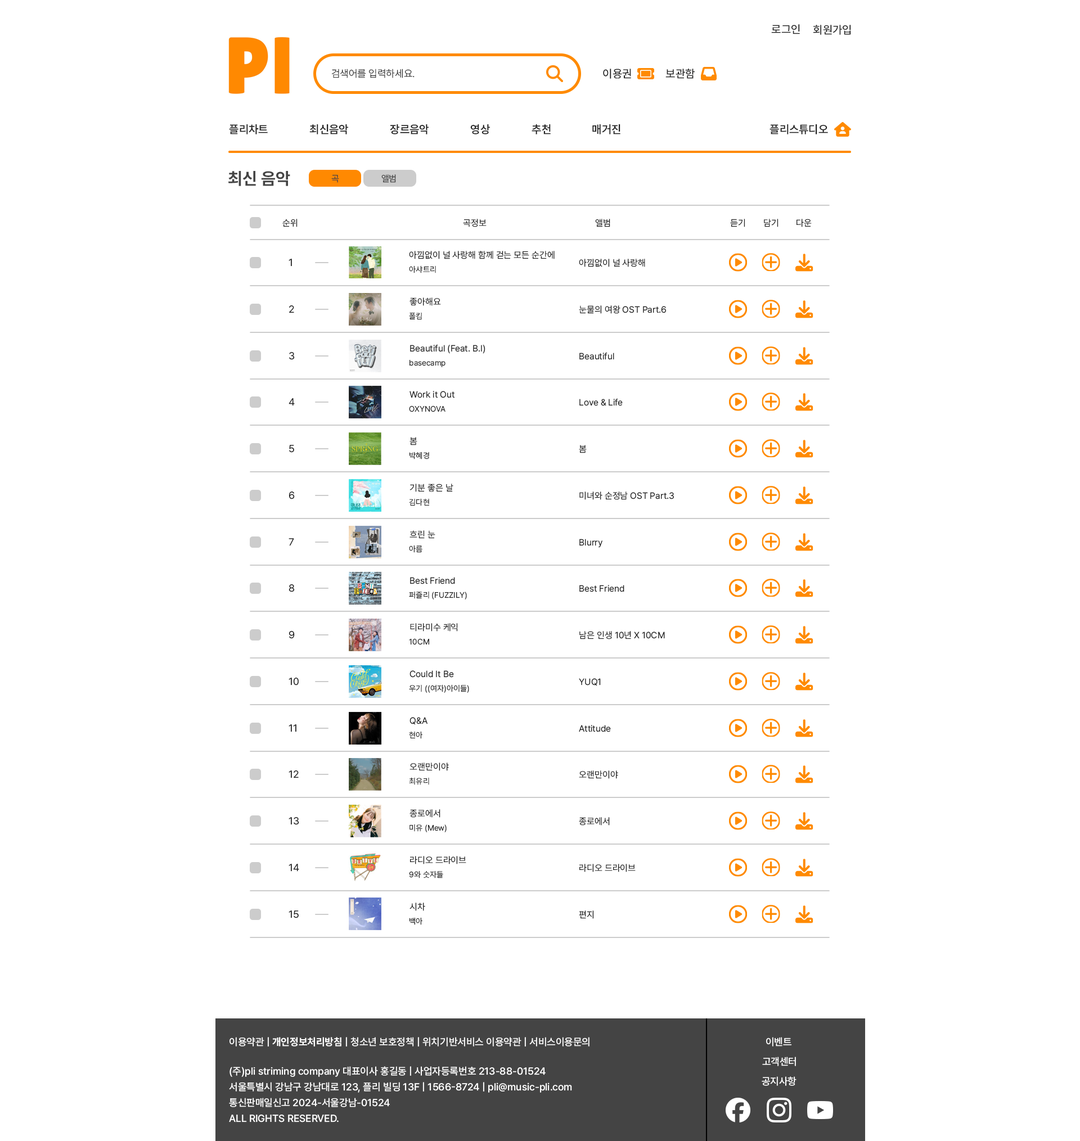
<style>
.page{position:relative;width:1080px;height:1141px;background:#ffffff}
.page>*{position:absolute;margin:0}
.t1{font:11.3px "Pretendard-Medium";color:#222222}
.t2{font:11.2px "Pretendard-Medium";color:#222222}
.t3{font:10.1px "Pretendard-Light";color:#222222}
.t4{font:11.3px "Pretendard-SemiBold";color:#222222}
.t5{font:16.9px "Pretendard-Bold";color:#444444}
.t6{font:9px "Pretendard-Regular";color:#444444}
.t7{font:9px "Pretendard-Regular";color:#222222}
.t8{font:10.1px "Pretendard-Regular";color:#222222}
.t9{font:7.9px "Pretendard-Regular";color:#222222}
.t10{font:10.1px "Pretendard-Medium";color:#ffffff}
.t11{font:10.1px "Pretendard-Bold";color:#ffffff}
.t12{font:10.1px/15.8px "Pretendard-Medium";color:#ffffff}
</style>
<div class="page">
<p class="t1" style="left:771px;top:24px;width:29px;height:10px">로그인</p>
<p class="t2" style="left:813px;top:25px;width:38px;height:10px">회원가입</p>
<p class="t3" style="left:331px;top:69px;width:84px;height:9px">검색어를 입력하세요.</p>
<p class="t1" style="left:603px;top:69px;width:28px;height:10px">이용권</p>
<p class="t2" style="left:665px;top:69px;width:30px;height:10px">보관함</p>
<p class="t4" style="left:229px;top:124px;width:39px;height:10px">플리차트</p>
<p class="t4" style="left:309px;top:124px;width:39px;height:10px">최신음악</p>
<p class="t4" style="left:390px;top:124px;width:39px;height:10px">장르음악</p>
<p class="t4" style="left:470px;top:124px;width:20px;height:10px">영상</p>
<p class="t4" style="left:532px;top:124px;width:19px;height:10px">추천</p>
<p class="t4" style="left:592px;top:124px;width:28px;height:10px">매거진</p>
<p class="t4" style="left:770px;top:124px;width:58px;height:10px">플리스튜디오</p>
<p class="t5" style="left:228px;top:171px;width:62px;height:15px">최신 음악</p>
<p class="t6" style="left:331px;top:175px;width:8px;height:8px">곡</p>
<p class="t6" style="left:381px;top:174px;width:15px;height:9px">앨범</p>
<p class="t7" style="left:282px;top:219px;width:16px;height:8px">순위</p>
<p class="t7" style="left:463px;top:219px;width:24px;height:8px">곡정보</p>
<p class="t7" style="left:595px;top:219px;width:15px;height:8px">앨범</p>
<p class="t7" style="left:730px;top:219px;width:15px;height:8px">듣기</p>
<p class="t7" style="left:764px;top:219px;width:14px;height:8px">담기</p>
<p class="t7" style="left:796px;top:219px;width:16px;height:8px">다운</p>
<p class="t7" style="left:409px;top:251px;width:146px;height:8px">아낌없이 널 사랑해 함께 걷는 모든 순간에</p>
<p class="t8" style="left:289px;top:259px;width:3px;height:8px">1</p>
<p class="t9" style="left:409px;top:266px;width:27px;height:7px">아샤트리</p>
<p class="t7" style="left:579px;top:259px;width:66px;height:8px">아낌없이 널 사랑해</p>
<p class="t8" style="left:289px;top:305px;width:5px;height:8px">2</p>
<p class="t7" style="left:410px;top:298px;width:31px;height:8px">좋아해요</p>
<p class="t7" style="left:579px;top:305px;width:87px;height:9px">눈물의 여왕 OST Part.6</p>
<p class="t9" style="left:409px;top:312px;width:13px;height:8px">폴킴</p>
<p class="t8" style="left:289px;top:352px;width:6px;height:8px">3</p>
<p class="t7" style="left:410px;top:345px;width:75px;height:9px">Beautiful (Feat. B.I)</p>
<p class="t7" style="left:579px;top:353px;width:35px;height:7px">Beautiful</p>
<p class="t9" style="left:410px;top:360px;width:36px;height:7px">basecamp</p>
<p class="t8" style="left:289px;top:398px;width:6px;height:8px">4</p>
<p class="t7" style="left:410px;top:391px;width:44px;height:7px">Work it Out</p>
<p class="t7" style="left:579px;top:399px;width:44px;height:7px">Love &amp; Life</p>
<p class="t9" style="left:409px;top:406px;width:37px;height:6px">OXYNOVA</p>
<p class="t7" style="left:410px;top:437px;width:7px;height:9px">봄</p>
<p class="t8" style="left:289px;top:445px;width:5px;height:8px">5</p>
<p class="t7" style="left:579px;top:445px;width:8px;height:8px">봄</p>
<p class="t9" style="left:409px;top:452px;width:20px;height:8px">박혜경</p>
<p class="t7" style="left:410px;top:484px;width:43px;height:8px">기분 좋은 날</p>
<p class="t8" style="left:289px;top:492px;width:6px;height:8px">6</p>
<p class="t7" style="left:579px;top:492px;width:95px;height:8px">미녀와 순정남 OST Part.3</p>
<p class="t9" style="left:409px;top:498px;width:20px;height:8px">김다현</p>
<p class="t7" style="left:410px;top:530px;width:25px;height:9px">흐린 눈</p>
<p class="t8" style="left:289px;top:538px;width:5px;height:8px">7</p>
<p class="t9" style="left:409px;top:545px;width:13px;height:8px">아름</p>
<p class="t7" style="left:579px;top:539px;width:24px;height:9px">Blurry</p>
<p class="t7" style="left:410px;top:577px;width:45px;height:7px">Best Friend</p>
<p class="t8" style="left:289px;top:584px;width:6px;height:8px">8</p>
<p class="t9" style="left:409px;top:591px;width:58px;height:9px">퍼즐리 (FUZZILY)</p>
<p class="t7" style="left:579px;top:585px;width:45px;height:7px">Best Friend</p>
<p class="t7" style="left:410px;top:623px;width:48px;height:9px">티라미수 케익</p>
<p class="t8" style="left:289px;top:631px;width:6px;height:8px">9</p>
<p class="t9" style="left:409px;top:638px;width:20px;height:7px">10CM</p>
<p class="t7" style="left:579px;top:631px;width:86px;height:9px">남은 인생 10년 X 10CM</p>
<p class="t8" style="left:289px;top:678px;width:10px;height:8px">10</p>
<p class="t7" style="left:410px;top:670px;width:44px;height:8px">Could It Be</p>
<p class="t9" style="left:409px;top:685px;width:60px;height:8px">우기 ((여자)아이들)</p>
<p class="t7" style="left:579px;top:678px;width:22px;height:8px">YUQ1</p>
<p class="t8" style="left:289px;top:724px;width:7px;height:8px">11</p>
<p class="t7" style="left:410px;top:717px;width:18px;height:8px">Q&amp;A</p>
<p class="t7" style="left:579px;top:725px;width:32px;height:7px">Attitude</p>
<p class="t9" style="left:409px;top:731px;width:13px;height:8px">현아</p>
<p class="t8" style="left:289px;top:771px;width:10px;height:7px">12</p>
<p class="t7" style="left:410px;top:763px;width:39px;height:8px">오랜만이야</p>
<p class="t7" style="left:579px;top:771px;width:39px;height:8px">오랜만이야</p>
<p class="t9" style="left:409px;top:777px;width:20px;height:8px">최유리</p>
<p class="t7" style="left:410px;top:809px;width:30px;height:9px">종로에서</p>
<p class="t8" style="left:289px;top:817px;width:10px;height:8px">13</p>
<p class="t7" style="left:579px;top:817px;width:31px;height:9px">종로에서</p>
<p class="t9" style="left:410px;top:824px;width:37px;height:8px">미유 (Mew)</p>
<p class="t7" style="left:410px;top:856px;width:56px;height:9px">라디오 드라이브</p>
<p class="t8" style="left:289px;top:864px;width:10px;height:8px">14</p>
<p class="t7" style="left:579px;top:864px;width:57px;height:8px">라디오 드라이브</p>
<p class="t9" style="left:409px;top:871px;width:34px;height:8px">9와 숫자들</p>
<p class="t7" style="left:410px;top:903px;width:15px;height:8px">시차</p>
<p class="t8" style="left:289px;top:911px;width:10px;height:8px">15</p>
<p class="t9" style="left:409px;top:917px;width:13px;height:8px">백아</p>
<p class="t7" style="left:579px;top:911px;width:15px;height:8px">편지</p>
<p class="t10" style="left:230px;top:1037px;width:360px;height:10px">이용약관 | <span class="t11">개인정보처리방침</span> | 청소년 보호정책 | 위치기반서비스 이용약관 | 서비스이용문의</p>
<p class="t10" style="left:766px;top:1037px;width:26px;height:10px">이벤트</p>
<p class="t10" style="left:762px;top:1057px;width:34px;height:9px">고객센터</p>
<p class="t12" style="left:229px;top:1066px;width:343px;height:57px">(주)pli striming company 대표이사 홍길동 | 사업자등록번호 213-88-01524<br>서울특별시 강남구 강남대로 123, 플리 빌딩 13F | 1566-8724 | pli@music-pli.com<br>통신판매일신고 2024-서울강남-01524      <br>ALL RIGHTS RESERVED.</p>
<p class="t10" style="left:762px;top:1077px;width:34px;height:9px">공지사항</p>
</div>
